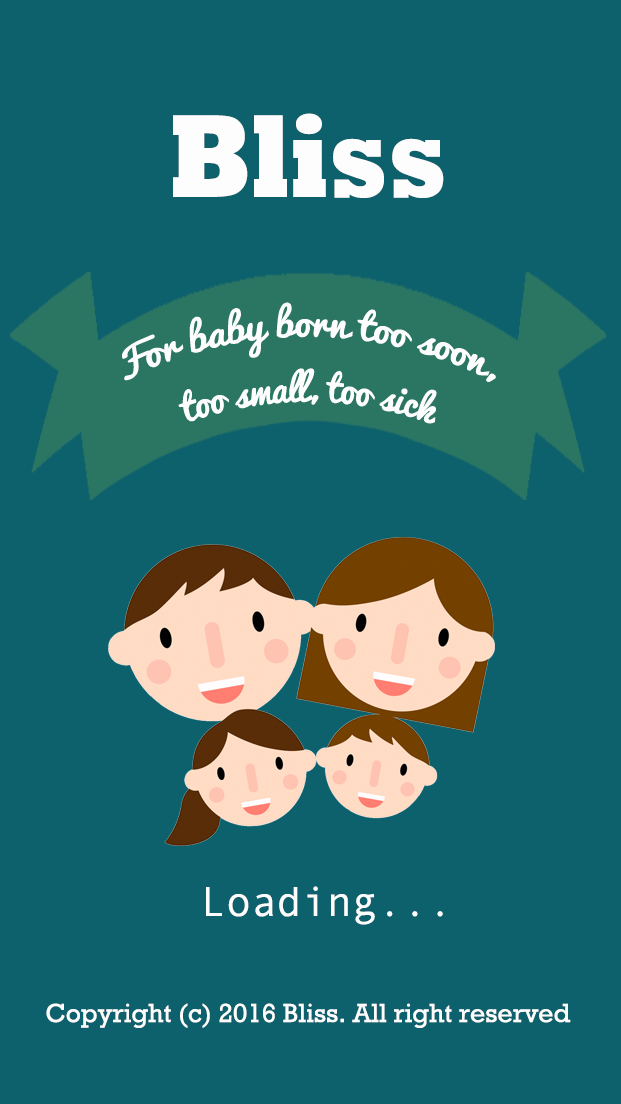
<style>
.page{position:relative;width:621px;height:1104px;background:#0d616d}
.page>*{position:absolute;margin:0}
.t1{font:120px "Rockwell-ExtraBold";color:#fefdfd;scale:0.8 1}
.t2{font:42px "AndaleMono";color:#fefdfd}
.t3{font:26.6px "Rockwell";color:#fefdfd}
</style>
<div class="page">
<p class="t1" style="left:173px;top:113px;width:271px;height:85px">Bliss</p>
<p class="t2" style="left:206px;top:886px;width:237px;height:39px">Loading...</p>
<p class="t3" style="left:46px;top:1003px;width:525px;height:25px">Copyright (c) 2016 Bliss. All right reserved</p>
</div>
